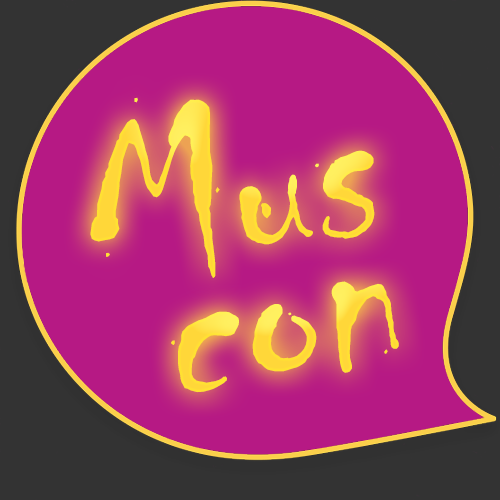
<style>
.page{position:relative;width:500px;height:500px;background:#b61984}
.page>*{position:absolute;margin:0}
.t1{font:250px "Chiller-Regular";color:#ffe039}
.t2{font:250px "Chiller-Regular";color:#ffe139}
</style>
<div class="page">
<p class="t1" style="left:90px;top:97px;width:285px;height:181px;rotate:-10deg">Mus</p>
<p class="t2" style="left:171px;top:281px;width:228px;height:112px;rotate:-10deg">con</p>
</div>
